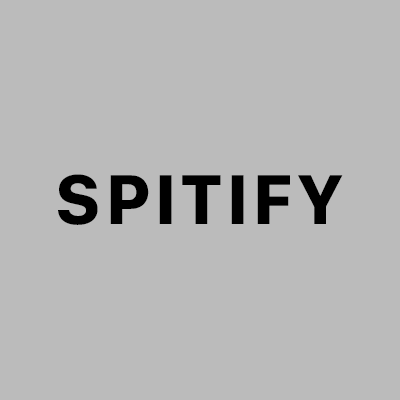
<style>
.page{position:relative;width:400px;height:400px;background:#bbbbbb}
.page>*{position:absolute;margin:0}
.t1{font:73px "SFCompactText-Bold";letter-spacing:0.05em;color:#000000}
</style>
<div class="page">
<p class="t1" style="left:58px;top:174px;width:285px;height:51px">SPITIFY</p>
</div>
